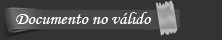
<style>
.page{position:relative;width:222px;height:40px;background:#333333}
.page>*{position:absolute;margin:0}
.t1{font:18px "MonotypeCorsiva";color:#ffffff}
</style>
<div class="page">
<p class="t1" style="left:16px;top:12px;width:135px;height:12px">Documento no válido</p>
</div>
